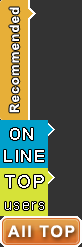
<style>
.page{position:relative;width:82px;height:247px;background:#333333}
.page>*{position:absolute;margin:0}
.t1{font:13px "Arial-BoldMT";letter-spacing:0.1em;color:#ffffff}
.t2{font:16px/22px "Arial-BoldMT";letter-spacing:0.1em;color:#ffffff}
.t3{font:14px/22px "ArialMT";letter-spacing:0.1em;color:#ffffff}
.t4{font:18px/22px "ArialMT";letter-spacing:0.1em;color:#ffffff}
.t5{font:16px "Arial-BoldMT";letter-spacing:0.1em;color:#ffffff}
</style>
<div class="page">
<p class="t1" style="left:8px;top:6px;width:16px;height:107px;rotate:-90deg">Recommended</p>
<p class="t2" style="left:4px;top:128px;width:40px;height:34px">ON<br>LINE</p>
<p class="t3" style="left:5px;top:175px;width:39px;height:35px"><span class="t4">TOP<br></span>users</p>
<p class="t5" style="left:8px;top:225px;width:67px;height:13px">All TOP</p>
</div>
